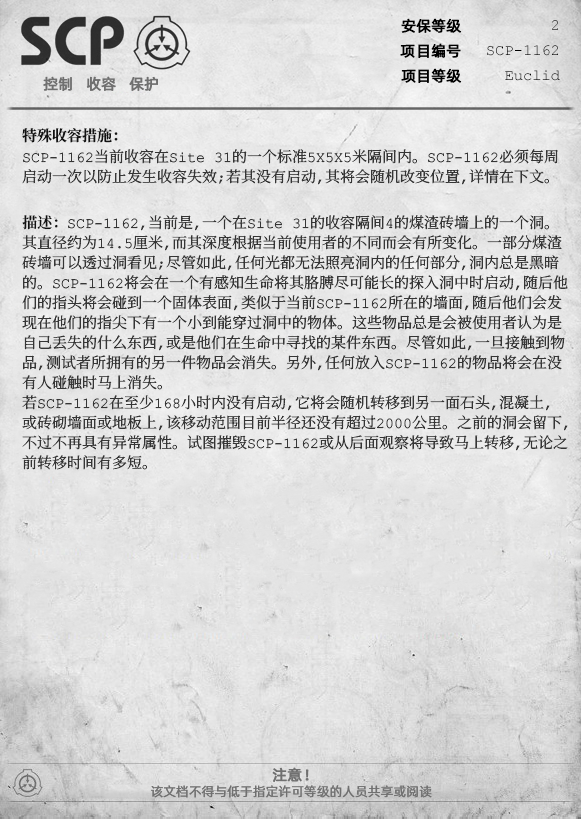
<style>
.page{position:relative;width:581px;height:819px}
.page>*{position:absolute;margin:0}
.t1{font:15px "AlibabaPuHuiTiR";color:#000000;font-weight:bold}
.t2{font:15px "AlibabaPuHuiTiR";color:#707070;font-weight:bold}
.t3{font:15px "ContainmentBreach-Bold";color:#121212}
.t4{font:15px/20px "ContainmentBreach-Regular";color:#353535}
.t5{font:15px/20px "ContainmentBreach-Bold";color:#121212}
.t6{font:13px "AlibabaPuHuiTiR";color:#707070}
</style>
<div class="page">
<p class="t1" style="left:401px;top:18px;width:61px;height:15px">安保等级</p>
<p class="t1" style="left:400px;top:43px;width:61px;height:15px">项目编号</p>
<p class="t2" style="left:43px;top:76px;width:115px;height:15px">控制   收容   保护</p>
<p class="t1" style="left:401px;top:68px;width:61px;height:15px">项目等级</p>
<p class="t3" style="left:22px;top:128px;width:96px;height:15px">特殊收容措施：</p>
<p class="t4" style="left:22px;top:149px;width:536px;height:36px">SCP-1162当前收容在Site 31的一个标准5X5X5米隔间内。SCP-1162必须每周<br>启动一次以防止发生收容失效；若其没有启动，其将会随机改变位置，详情在下文。</p>
<p class="t4" style="left:22px;top:215px;width:546px;height:255px"><span class="t5">描述：</span>SCP-1162，当前是，一个在Site 31的收容隔间4的煤渣砖墙上的一个洞。<br>其直径约为14.5厘米，而其深度根据当前使用者的不同而会有所变化。一部分煤渣<br>砖墙可以透过洞看见；尽管如此，任何光都无法照亮洞内的任何部分，洞内总是黑暗<br>的。SCP-1162将会在一个有感知生命将其胳膊尽可能长的探入洞中时启动，随后他<br>们的指头将会碰到一个固体表面，类似于当前SCP-1162所在的墙面，随后他们会发<br>现在他们的指尖下有一个小到能穿过洞中的物体。这些物品总是会被使用者认为是<br>自己丢失的什么东西，或是他们在生命中寻找的某件东西。尽管如此，一旦接触到物<br>品，测试者所拥有的另一件物品会消失。另外，任何放入SCP-1162的物品将会在没<br>有人碰触时马上消失。<br>若SCP-1162在至少168小时内没有启动，它将会随机转移到另一面石头，混凝土，<br>或砖砌墙面或地板上，该移动范围目前半径还没有超过2000公里。之前的洞会留下，<br>不过不再具有异常属性。试图摧毁SCP-1162或从后面观察将导致马上转移，无论之<br>前转移时间有多短。</p>
<p class="t2" style="left:272px;top:767px;width:37px;height:15px">注意！</p>
<p class="t6" style="left:151px;top:785px;width:281px;height:13px">该文档不得与低于指定许可等级的人员共享或阅读</p>
</div>
